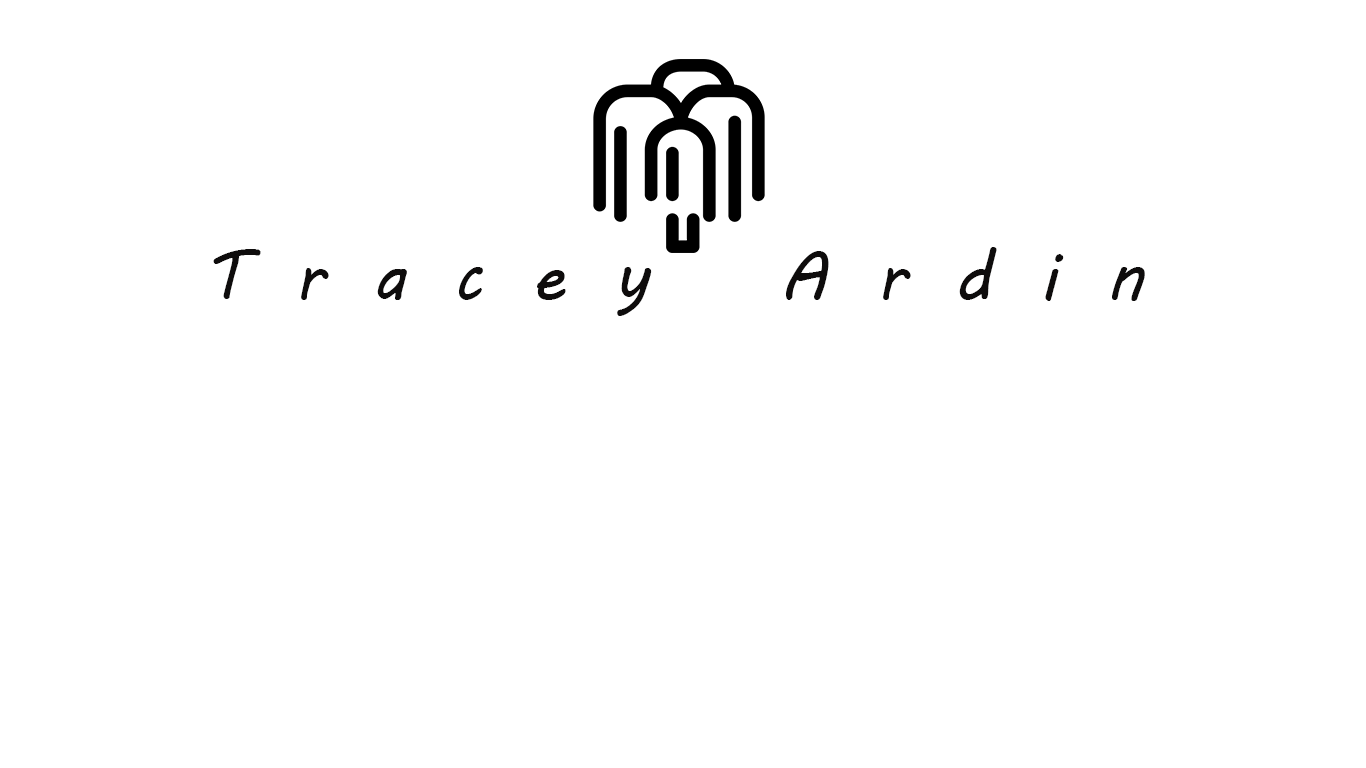
<style>
.page{position:relative;width:1366px;height:768px;background:#ffffff}
.page>*{position:absolute;margin:0}
.t1{font:69px "MVBoli";letter-spacing:0.7em;color:#0e0c0c}
</style>
<div class="page">
<p class="t1" style="left:213px;top:247px;width:932px;height:69px">Tracey Ardin</p>
</div>
